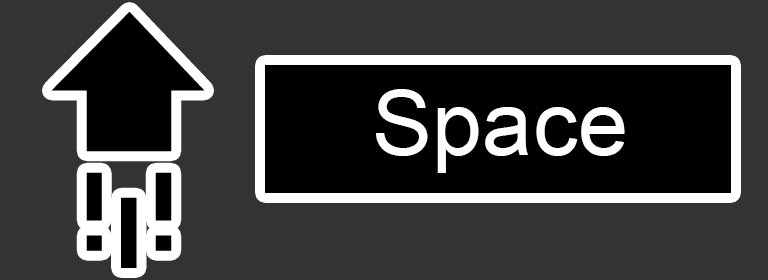
<style>
.page{position:relative;width:768px;height:280px;background:#333333}
.page>*{position:absolute;margin:0}
.t1{font:90px "ArialMT";color:#ffffff}
</style>
<div class="page">
<p class="t1" style="left:376px;top:89px;width:249px;height:84px">Space</p>
</div>
